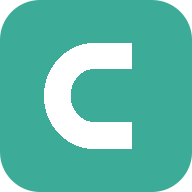
<style>
.page{position:relative;width:192px;height:192px;background:#3cac98}
.page>*{position:absolute;margin:0}
.t1{font:168px "SpinCycle";color:#ffffff}
</style>
<div class="page">
<p class="t1" style="left:44px;top:43px;width:88px;height:106px">c</p>
</div>
